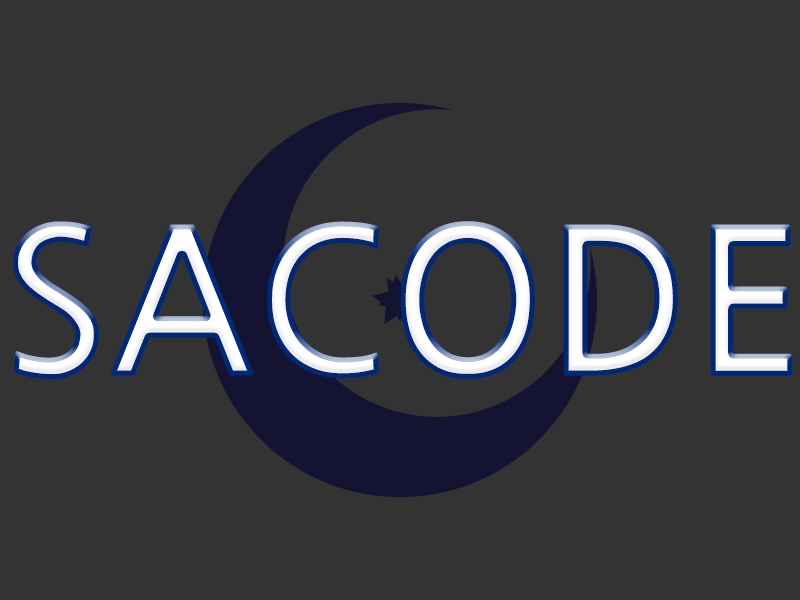
<style>
.page{position:relative;width:800px;height:600px;background:#333333}
.page>*{position:absolute;margin:0}
.t1{font:200px "NanumGothicBold"}
</style>
<div class="page">
<p class="t1" style="left:13px;top:221px;width:780px;height:158px">SACODE</p>
</div>
